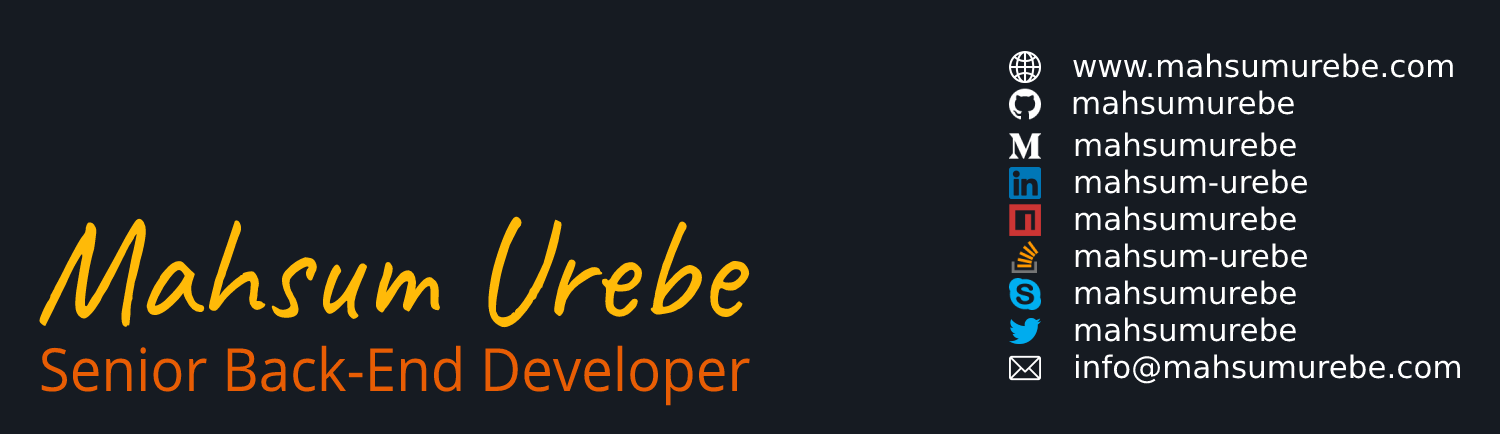
<style>
.page{position:relative;width:1500px;height:434px;background:#161b22}
.page>*{position:absolute;margin:0}
.t1{font:31px "DejaVuSans";color:#ffffff}
.t2{font:150.9px "Caveat-Regular";color:#ffba08;scale:0.92 1}
.t3{font:59.6px "OpenSans-Regular";color:#e85d04;scale:0.95 1}
</style>
<div class="page">
<p class="t1" style="left:1073px;top:53px;width:380px;height:25px">www.mahsumurebe.com</p>
<p class="t1" style="left:1073px;top:90px;width:221px;height:25px">mahsumurebe</p>
<p class="t1" style="left:1075px;top:132px;width:221px;height:25px">mahsumurebe</p>
<p class="t1" style="left:1075px;top:169px;width:232px;height:25px">mahsum-urebe</p>
<p class="t1" style="left:1075px;top:206px;width:221px;height:25px">mahsumurebe</p>
<p class="t2" style="left:39px;top:216px;width:711px;height:112px">Mahsum Urebe</p>
<p class="t1" style="left:1075px;top:243px;width:232px;height:25px">mahsum-urebe</p>
<p class="t1" style="left:1075px;top:280px;width:221px;height:25px">mahsumurebe</p>
<p class="t1" style="left:1075px;top:317px;width:221px;height:25px">mahsumurebe</p>
<p class="t3" style="left:41px;top:345px;width:709px;height:61px">Senior Back-End Developer</p>
<p class="t1" style="left:1076px;top:354px;width:384px;height:30px">info@mahsumurebe.com</p>
</div>
